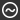
<style>
.page{position:relative;width:20px;height:20px;background:#333333}
.page>*{position:absolute;margin:0}
.t1{font:18.1px "Consolas";color:#ffffff;scale:1.07 1}
</style>
<div class="page">
<p class="t1" style="left:5px;top:8px;width:11px;height:5px">~</p>
</div>
